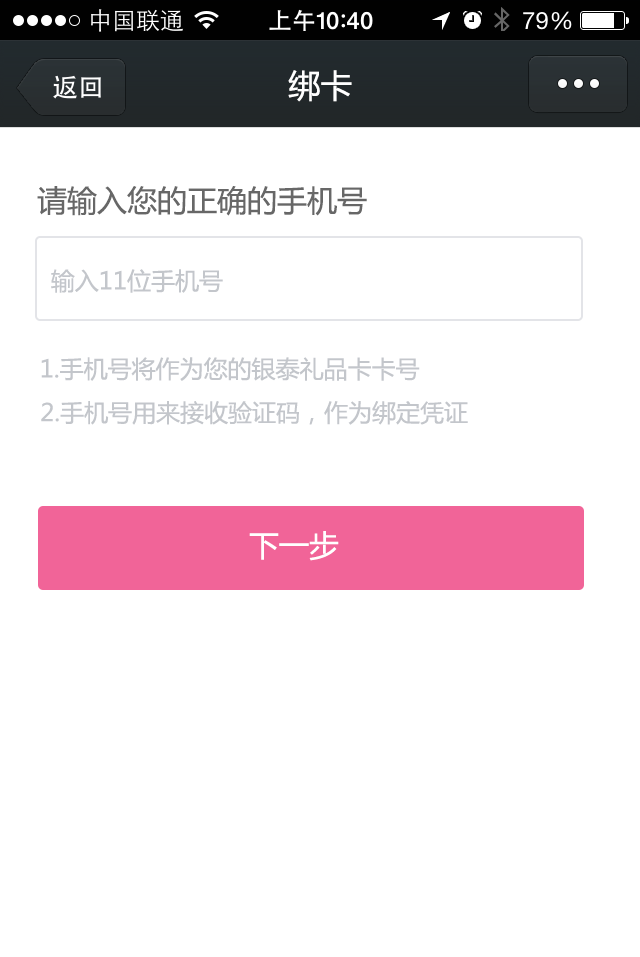
<style>
.page{position:relative;width:640px;height:957px;background:#ffffff}
.page>*{position:absolute;margin:0}
.t1{font:32px "MicrosoftYaHei";color:#ffffff}
.t2{font:30px "MicrosoftYaHei";color:#676767}
.t3{font:24px "MicrosoftYaHei";color:#c3c6cb}
.t4{font:30px "MicrosoftYaHei";color:#ffffff}
</style>
<div class="page">
<p class="t1" style="left:288px;top:70px;width:64px;height:32px">绑卡</p>
<p class="t2" style="left:37px;top:186px;width:330px;height:30px">请输入您的正确的手机号</p>
<p class="t3" style="left:51px;top:269px;width:172px;height:24px">输入11位手机号</p>
<p class="t3" style="left:41px;top:357px;width:379px;height:24px">1.手机号将作为您的银泰礼品卡卡号</p>
<p class="t3" style="left:41px;top:401px;width:427px;height:24px">2.手机号用来接收验证码，作为绑定凭证</p>
<p class="t4" style="left:249px;top:531px;width:90px;height:30px">下一步</p>
</div>
